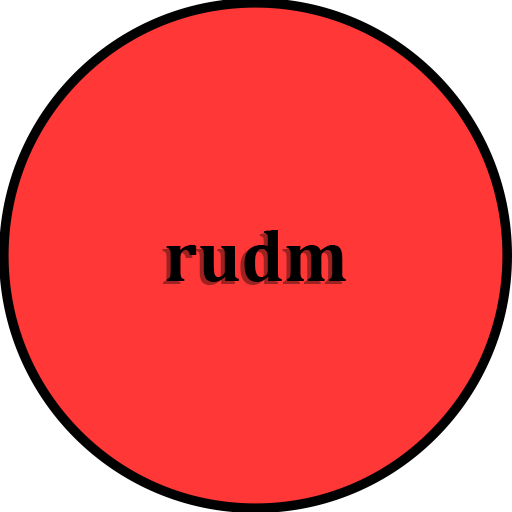
<style>
.page{position:relative;width:512px;height:512px;background:#ff3737}
.page>*{position:absolute;margin:0}
.t1{font:72px "Cambria-Bold";color:#000000}
</style>
<div class="page">
<p class="t1" style="left:166px;top:230px;width:180px;height:52px">rudm</p>
</div>
